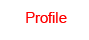
<style>
.page{position:relative;width:89px;height:40px;background:#ffffff}
.page>*{position:absolute;margin:0}
.t1{font:14.7px "ArialMT";color:#ff0000}
</style>
<div class="page">
<p class="t1" style="left:26px;top:12px;width:41px;height:11px">Profile</p>
</div>
